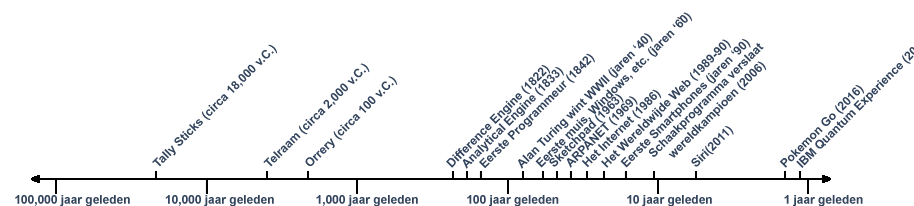
<style>
.page{position:relative;width:914px;height:206px;background:#ffffff}
.page>*{position:absolute;margin:0}
.t1{font:12px "Arial-BoldMT";color:#33445d}
</style>
<div class="page">
<p class="t1" style="left:535px;top:12px;width:158px;height:156px;rotate:-45deg">Eerste muis, Windows, etc. (jaren ‘60)</p>
<p class="t1" style="left:518px;top:33px;width:135px;height:136px;rotate:-45deg">Alan Turing wint WWII (jaren ‘40)</p>
<p class="t1" style="left:601px;top:39px;width:130px;height:129px;rotate:-45deg">Het Wereldwijde Web (1989-90)</p>
<p class="t1" style="left:620px;top:39px;width:131px;height:129px;rotate:-45deg">Eerste Smartphones (jaren ‘90)</p>
<p class="t1" style="left:152px;top:44px;width:126px;height:123px;rotate:-45deg">Tally Sticks (circa 18,000 v.C.)</p>
<p class="t1" style="left:479px;top:53px;width:116px;height:116px;rotate:-45deg">Eerste Programmeur (1842)</p>
<p class="t1" style="left:649px;top:42px;width:118px;height:116px;rotate:-45deg">Schaakprogramma verslaat <br>    wereldkampioen (2006)</p>
<p class="t1" style="left:263px;top:63px;width:107px;height:104px;rotate:-45deg">Telraam (circa 2,000 v.C.)</p>
<p class="t1" style="left:446px;top:65px;width:105px;height:103px;rotate:-45deg">Difference Engine (1822)</p>
<p class="t1" style="left:305px;top:76px;width:93px;height:90px;rotate:-45deg">Orrery (circa 100 v.C.)</p>
<p class="t1" style="left:462px;top:67px;width:102px;height:102px;rotate:-45deg">Analytical Engine (1833)</p>
<p class="t1" style="left:581px;top:89px;width:81px;height:79px;rotate:-45deg">Het Internet (1986)</p>
<p class="t1" style="left:779px;top:85px;width:86px;height:83px;rotate:-45deg">Pokemon Go (2016)</p>
<p class="t1" style="left:549px;top:94px;width:75px;height:73px;rotate:-45deg">Sketchpad (1963)</p>
<p class="t1" style="left:566px;top:96px;width:72px;height:72px;rotate:-45deg">ARPANET (1969)</p>
<p class="t1" style="left:691px;top:126px;width:43px;height:41px;rotate:-45deg">Siri(2011)</p>
<p class="t1" style="left:15px;top:195px;width:848px;height:12px">100,000 jaar geleden   10,000 jaar geleden     1,000 jaar geleden       100 jaar geleden  10 jaar geleden      1 jaar geleden</p>
</div>
